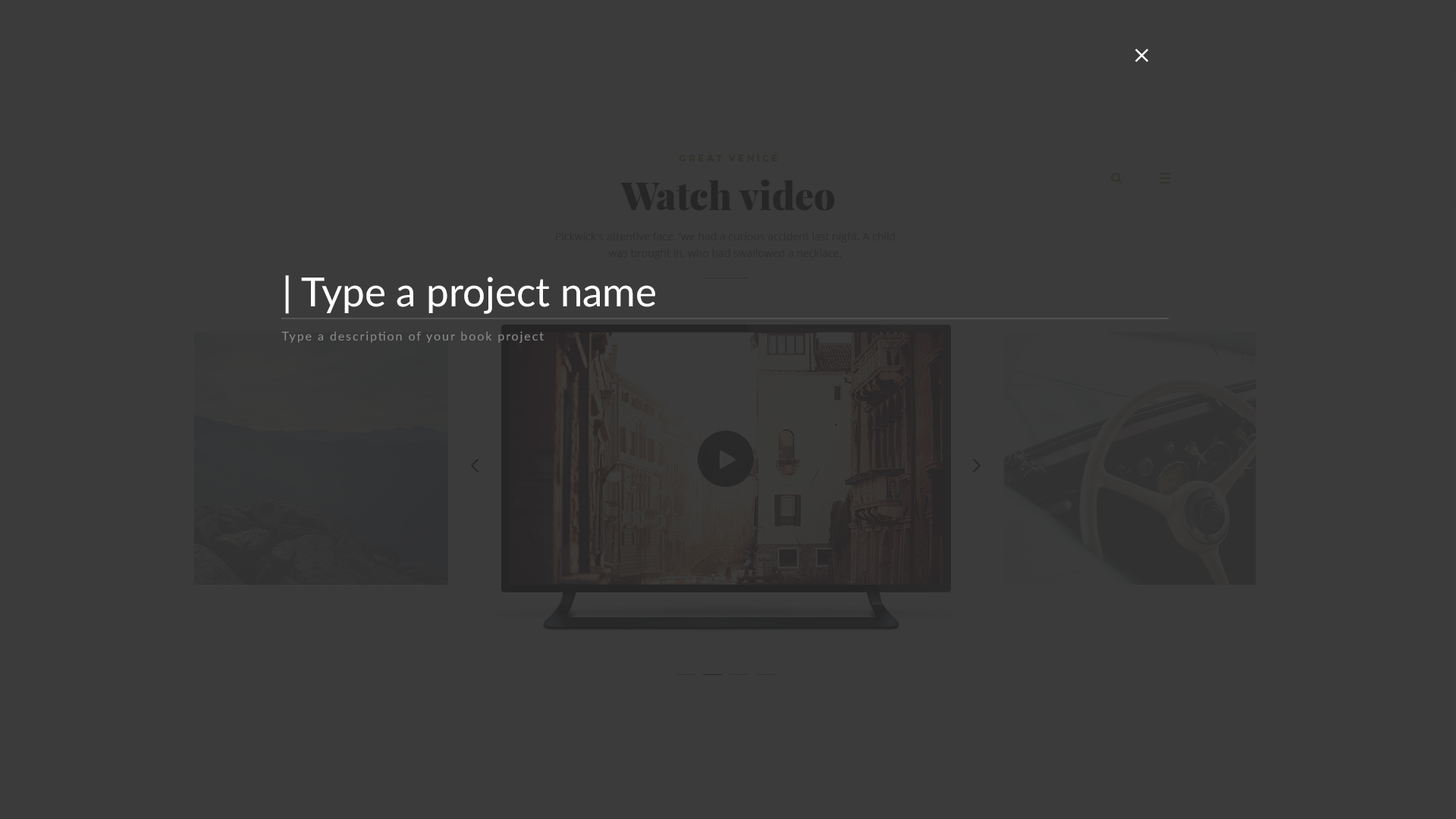
<style>
.page{position:relative;width:1456px;height:819px;background:#3b3b3b}
.page>*{position:absolute;margin:0}
.t1{font:40.2px "Lato-Regular";color:#ffffff}
.t2{font:12.1px "Lato-Regular";letter-spacing:0.12em;color:#8d8c8d}
</style>
<div class="page">
<p class="t1" style="left:285px;top:275px;width:370px;height:39px">| Type a project name</p>
<p class="t2" style="left:281px;top:331px;width:263px;height:12px">Type a description of your book project</p>
</div>
